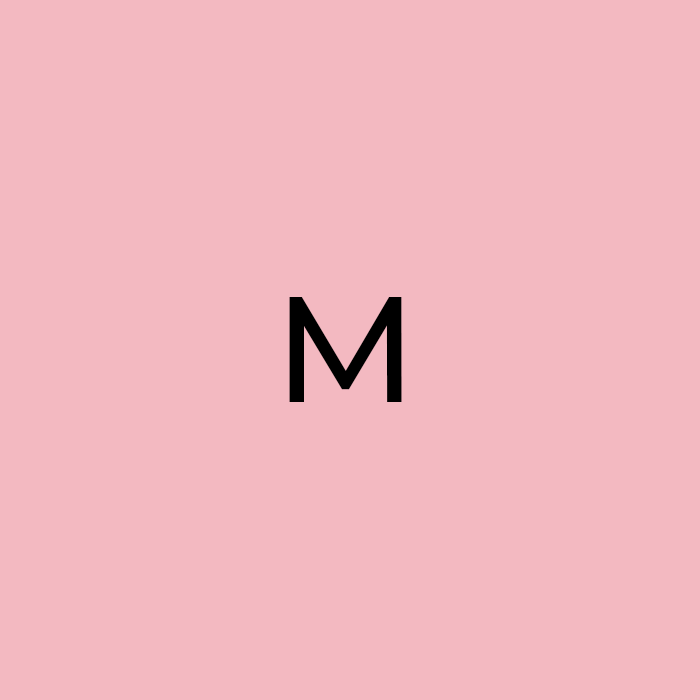
<style>
.page{position:relative;width:700px;height:700px;background:#f3b9c1}
.page>*{position:absolute;margin:0}
.t1{font:150px "Montserrat-Medium";color:#000000}
</style>
<div class="page">
<p class="t1" style="left:289px;top:297px;width:113px;height:105px">M</p>
</div>
